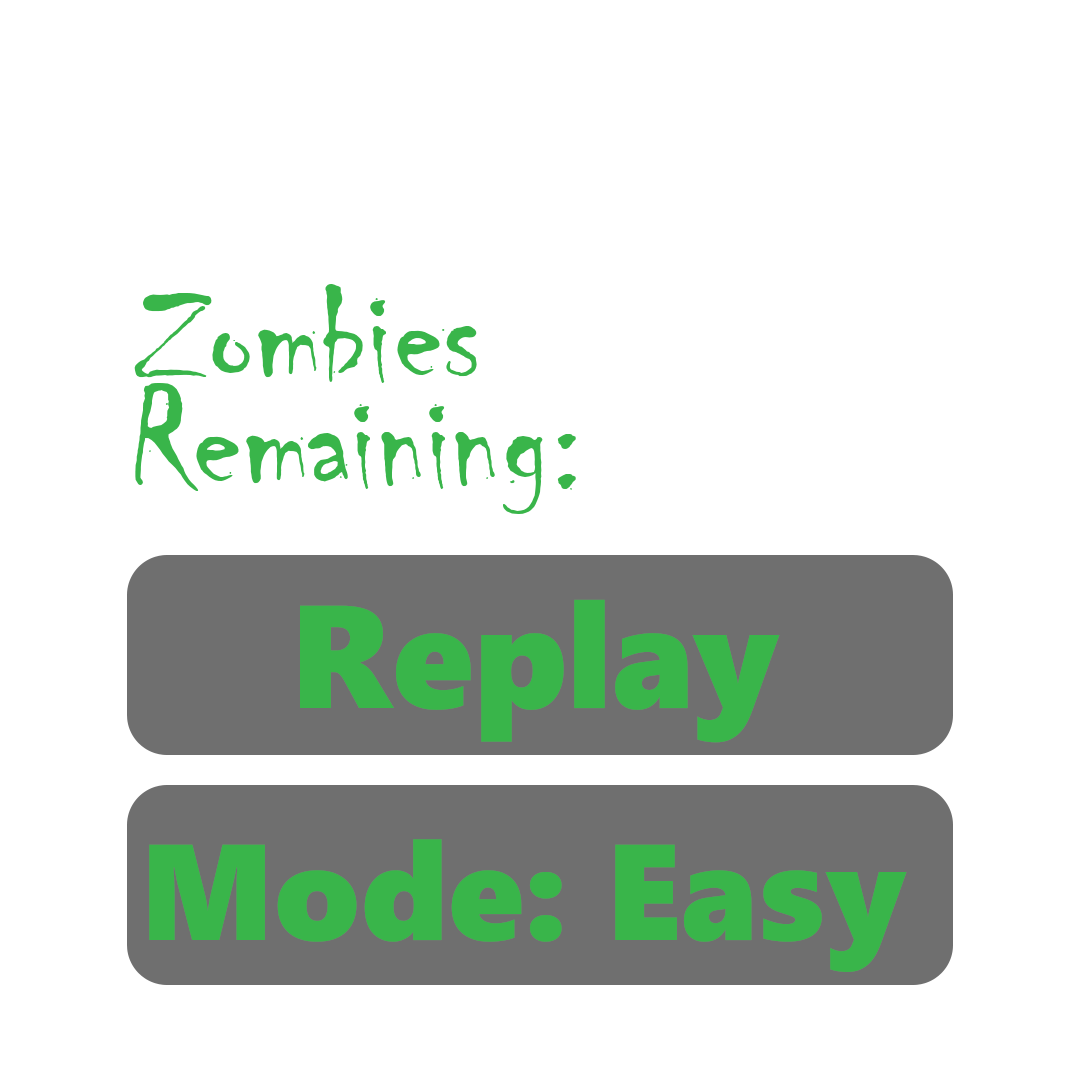
<style>
.page{position:relative;width:1080px;height:1080px;background:#ffffff}
.page>*{position:absolute;margin:0}
.t1{font:145.8px "Chiller-Regular";color:#39b54a}
.t2{font:145.8px "SegoeWP-Black";color:#39b54a}
.t3{font:136.1px "SegoeWP-Black";color:#39b54a}
</style>
<div class="page">
<p class="t1" style="left:134px;top:284px;width:343px;height:99px">Zombies</p>
<p class="t1" style="left:135px;top:383px;width:441px;height:131px">Remaining:</p>
<p class="t2" style="left:300px;top:599px;width:480px;height:144px">Replay</p>
<p class="t3" style="left:149px;top:839px;width:413px;height:103px">Mode:</p>
<p class="t3" style="left:615px;top:844px;width:292px;height:128px">Easy</p>
</div>
